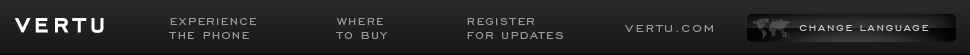
<style>
.page{position:relative;width:970px;height:55px}
.page>*{position:absolute;margin:0}
.t1{font:13px/14px "EngraversGothicBT-Regular";letter-spacing:0.15em;color:#999999;text-transform:uppercase}
.t2{font:13px "EngraversGothicBT-Regular";letter-spacing:0.15em;color:#999999;text-transform:uppercase;scale:1.1 1}
.t3{font:11px "EngraversGothicBT-Regular";letter-spacing:0.15em;color:#cccccc;text-transform:uppercase;scale:1.1 1}
</style>
<div class="page">
<p class="t1" style="left:169px;top:18px;width:87px;height:21px">EXPERIENCE<br>THE PHONE</p>
<p class="t1" style="left:336px;top:18px;width:52px;height:21px">WHERE<br>TO BUY</p>
<p class="t1" style="left:467px;top:18px;width:96px;height:21px">REGISTER<br>FOR UPDATES</p>
<p class="t2" style="left:625px;top:25px;width:88px;height:7px">vertu.com</p>
<p class="t3" style="left:799px;top:25px;width:130px;height:6px">CHANGE language</p>
</div>
